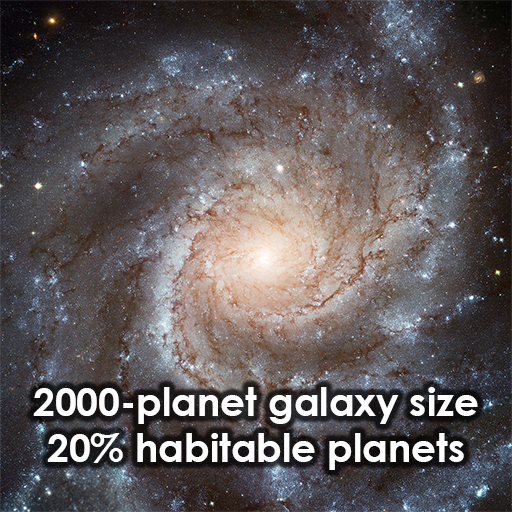
<style>
.page{position:relative;width:512px;height:512px}
.page>*{position:absolute;margin:0}
.t1{font:38.9px "CenturyGothic-Bold";color:#ffffff}
</style>
<div class="page">
<p class="t1" style="left:33px;top:387px;width:445px;height:83px;text-align:center">2000-planet galaxy size<br>20% habitable planets</p>
</div>
